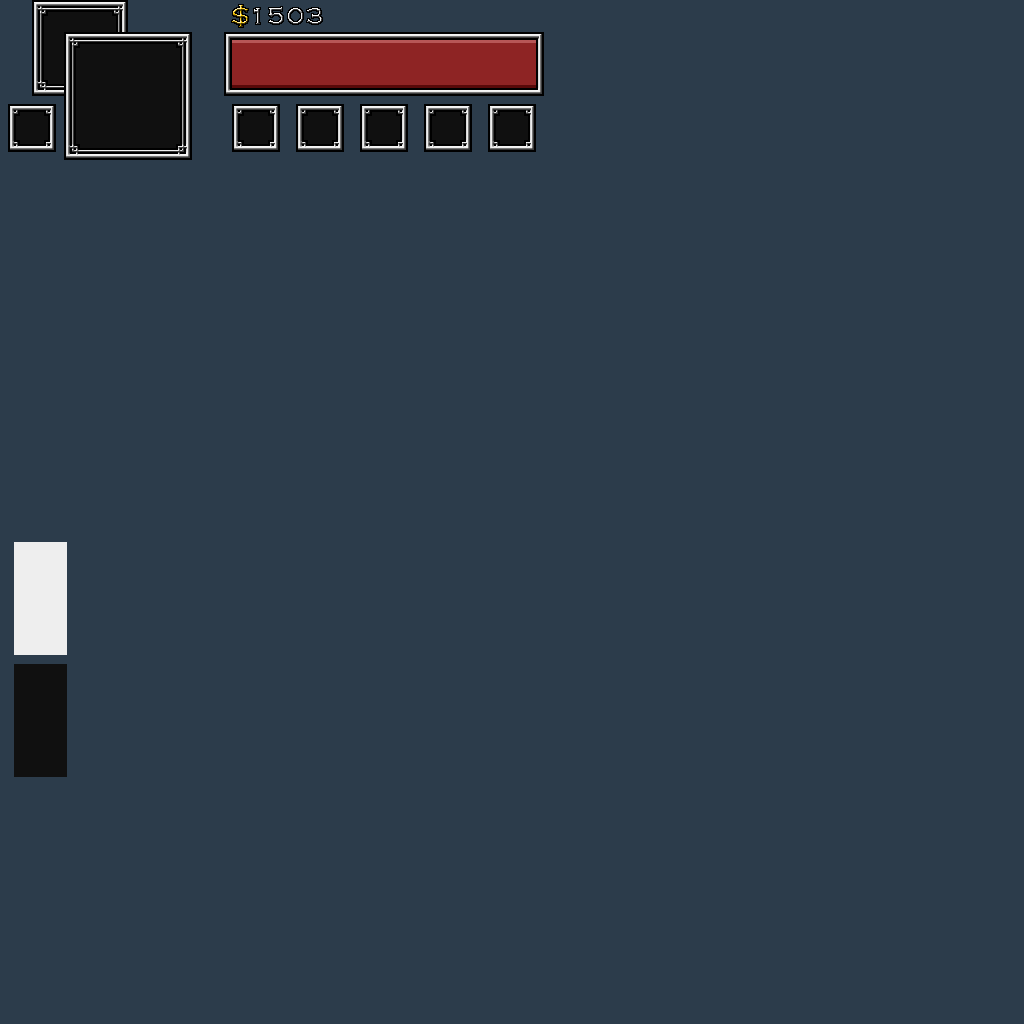
<style>
.page{position:relative;width:1024px;height:1024px;background:#2c3c4b}
.page>*{position:absolute;margin:0}
.t1{font:24px "CopperplateGothic-Light";letter-spacing:0.12em}
</style>
<div class="page">
<p class="t1" style="left:232px;top:5px;width:16px;height:22px">$</p>
<p class="t1" style="left:254px;top:7px;width:68px;height:17px">1503</p>
</div>
